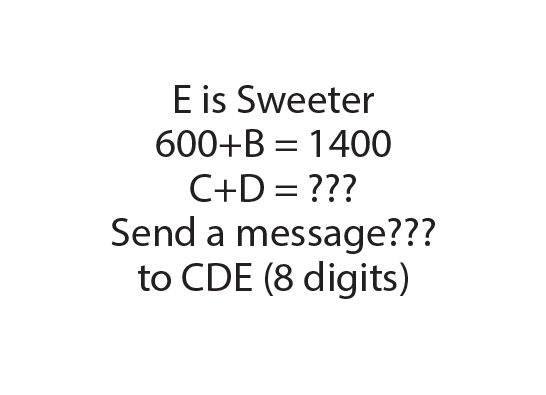
<style>
.page{position:relative;width:546px;height:395px;background:#ffffff}
.page>*{position:absolute;margin:0}
.t1{font:41.3px/44.4px "MyriadPro-Regular";color:#231f20}
</style>
<div class="page">
<p class="t1" style="left:111px;top:85px;width:324px;height:214px;text-align:center">E is Sweeter<br>600+B = 1400<br>C+D = ???<br>Send a message??? to CDE (8 digits)</p>
</div>
